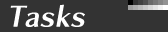
<style>
.page{position:relative;width:168px;height:32px;background:#333333}
.page>*{position:absolute;margin:0}
.t1{font:28px "ChiaroStd-B";letter-spacing:0.025em;color:#ffffff;font-style:italic}
.t2{font:28px "ChiaroStd-B";letter-spacing:-0.01em;color:#ffffff;font-style:italic}
.t3{font:28px "ChiaroStd-B";letter-spacing:0.05em;color:#ffffff;font-style:italic}
</style>
<div class="page">
<p class="t1" style="left:10px;top:4px;width:75px;height:23px"><span class="t2">T</span>as<span class="t3">ks</span></p>
</div>
